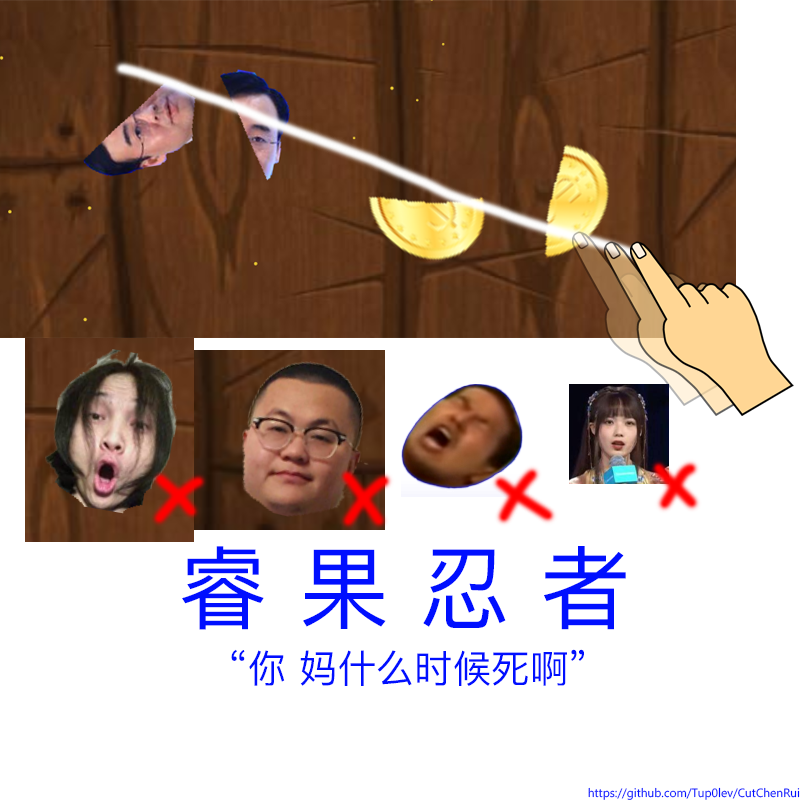
<style>
.page{position:relative;width:800px;height:800px;background:#ffffff}
.page>*{position:absolute;margin:0}
.t1{font:90.4px "MicrosoftYaHei";color:#000fff}
.t2{font:38.4px "MicrosoftYaHei";color:#000fff}
.t3{font:12px "MicrosoftYaHei";color:#000fff}
</style>
<div class="page">
<p class="t1" style="left:182px;top:546px;width:444px;height:84px">睿 果 忍 者</p>
<p class="t2" style="left:231px;top:649px;width:353px;height:37px">“你 妈什么时候死啊”</p>
<p class="t3" style="left:588px;top:787px;width:212px;height:13px">https://github.com/Tup0lev/CutChenRui</p>
</div>
